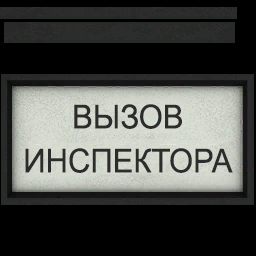
<style>
.page{position:relative;width:256px;height:256px;background:#000000}
.page>*{position:absolute;margin:0}
.t1{font:33px/44px "ArialMT";color:#2c2c2c;scale:0.94 1}
</style>
<div class="page">
<p class="t1" style="left:25px;top:104px;width:208px;height:69px;text-align:center">ВЫЗОВ<br>ИНСПЕКТОРА</p>
</div>
